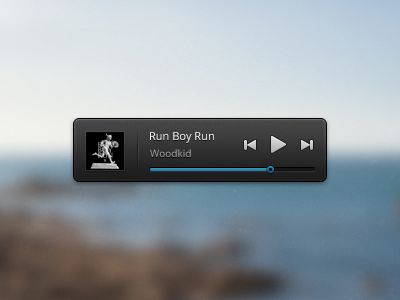
<style>
.page{position:relative;width:400px;height:300px}
.page>*{position:absolute;margin:0}
.t1{font:11px "OpenSans";color:#ffffff}
.t2{font:10px "OpenSans";color:#979797}
</style>
<div class="page">
<p class="t1" style="left:150px;top:132px;width:64px;height:11px">Run Boy Run</p>
<p class="t2" style="left:150px;top:149px;width:41px;height:8px">Woodkid</p>
</div>
